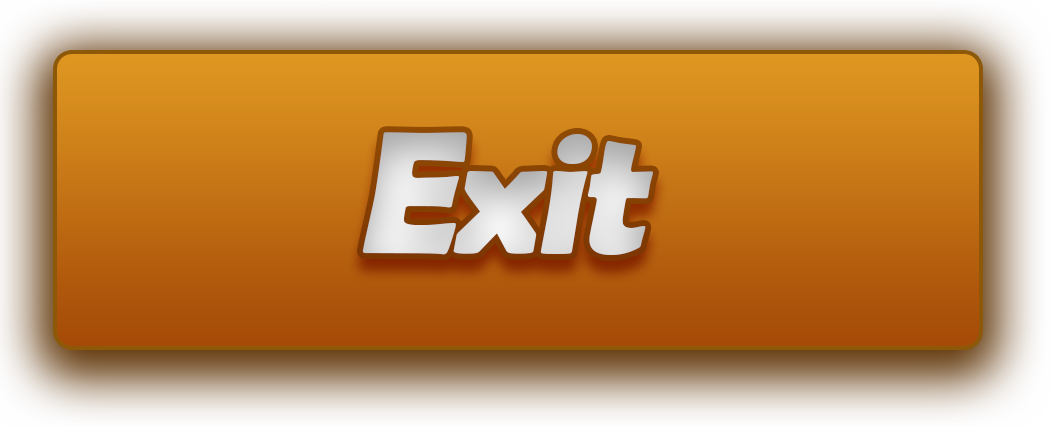
<style>
.page{position:relative;width:1051px;height:427px}
.page>*{position:absolute;margin:0}
.t1{font:176.4px "BerlinSansFBDemi-Bold";letter-spacing:-0.025em;color:#ffffff;font-style:italic}
</style>
<div class="page">
<p class="t1" style="left:362px;top:132px;width:291px;height:123px">Exit</p>
</div>
